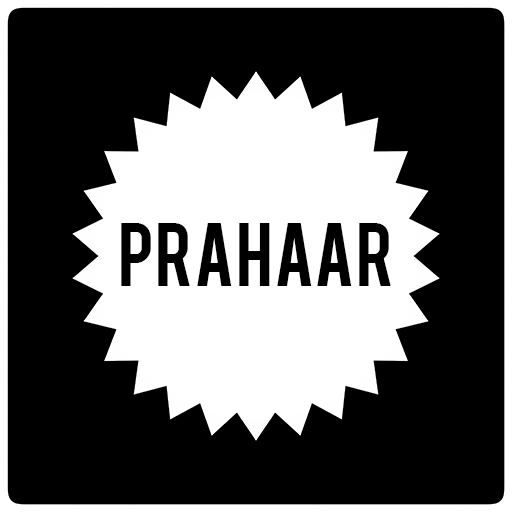
<style>
.page{position:relative;width:512px;height:512px;background:#000000}
.page>*{position:absolute;margin:0}
.t1{font:70px "Bebas";color:#000000}
</style>
<div class="page">
<p class="t1" style="left:121px;top:223px;width:270px;height:63px">PRAHAAR</p>
</div>
